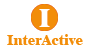
<style>
.page{position:relative;width:90px;height:49px;background:#ffffff}
.page>*{position:absolute;margin:0}
.t1{font:13px "Dutch801BT-ExtraBold";color:#ffffff;scale:0.96 1}
.t2{font:7.1px "Dutch801BT-ExtraBold";color:#f28d09}
</style>
<div class="page">
<p class="t1" style="left:39px;top:9px;width:11px;height:18px">I</p>
<p class="t2" style="left:7px;top:34px;width:76px;height:11px">InterActive</p>
</div>
